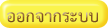
<style>
.page{position:relative;width:108px;height:28px;background:#faf44c}
.page>*{position:absolute;margin:0}
.t1{font:24px "THSarabunPSK-Bold";color:#895926}
</style>
<div class="page">
<p class="t1" style="left:7px;top:12px;width:91px;height:11px">ออกจากระบบ</p>
</div>
